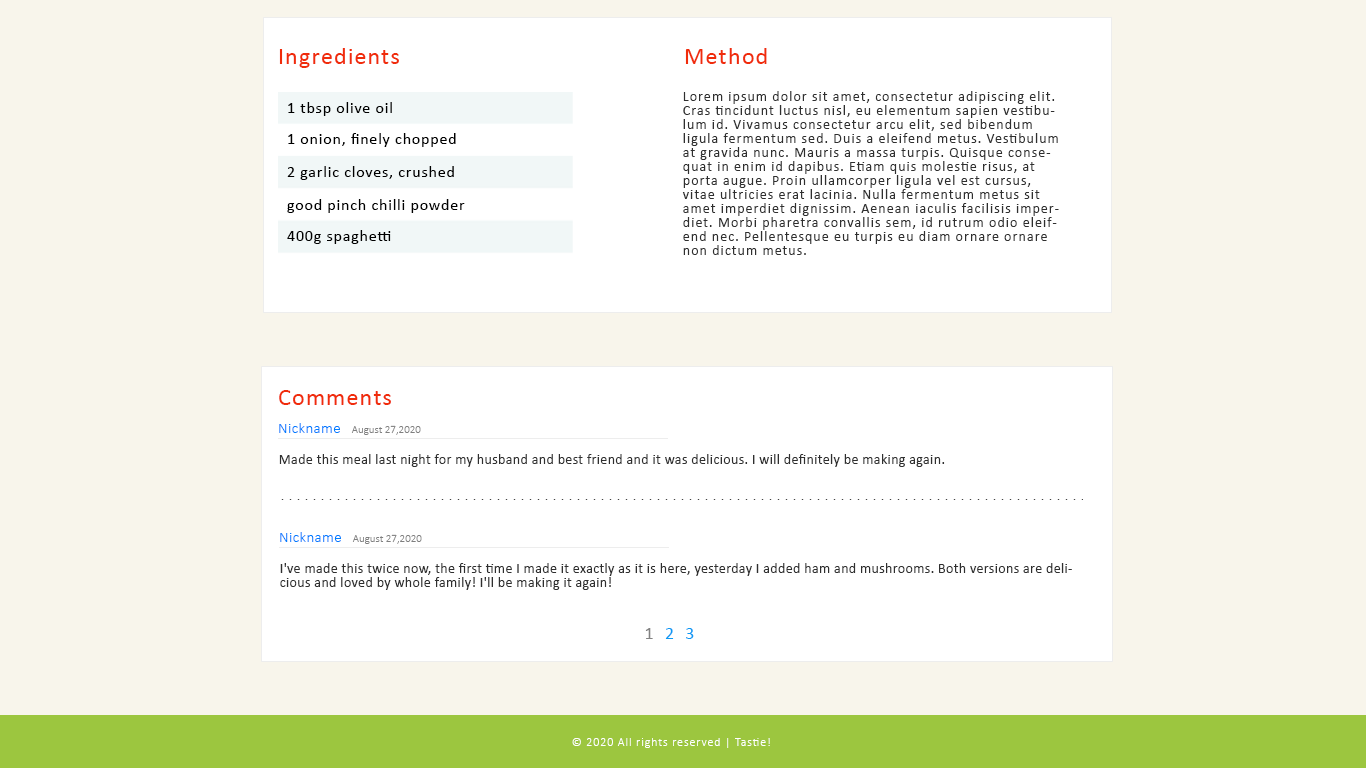
<style>
.page{position:relative;width:1366px;height:768px;background:#f8f5eb}
.page>*{position:absolute;margin:0}
.t1{font:24px "Calibri";letter-spacing:0.05em;color:#f02c0b}
.t2{font:16px "Calibri";letter-spacing:0.05em;color:#000000}
.t3{font:14px/14px "Calibri";letter-spacing:0.075em;color:#2f2f2f}
.t4{font:15px "Calibri-Light";letter-spacing:0.025em;color:#007eff}
.t5{font:11px "Calibri-Light";color:#7f7f7f}
.t6{font:14px "Calibri";letter-spacing:0.025em;color:#2f2f2f}
.t7{font:14px/14px "Calibri";letter-spacing:0.025em;color:#2f2f2f}
.t8{font:18px "Calibri";letter-spacing:0.2em;color:#0c9af4}
.t9{font:18px "Calibri";letter-spacing:0.2em;color:#828282}
.t10{font:12px "Calibri-Light";letter-spacing:0.075em;color:#ffffff}
</style>
<div class="page">
<p class="t1" style="left:279px;top:48px;width:120px;height:20px">Ingredients</p>
<p class="t1" style="left:685px;top:48px;width:82px;height:16px">Method</p>
<p class="t2" style="left:288px;top:102px;width:104px;height:14px">1 tbsp olive oil</p>
<p class="t3" style="left:682px;top:91px;width:377px;height:164px">Lorem ipsum dolor sit amet, consectetur adipiscing elit. Cras tincidunt luctus nisl, eu elementum sapien vestibulum id. Vivamus consectetur arcu elit, sed bibendum ligula fermentum sed. Duis a eleifend metus. Vestibulum at gravida nunc. Mauris a massa turpis. Quisque consequat in enim id dapibus. Etiam quis molestie risus, at porta augue. Proin ullamcorper ligula vel est cursus, vitae ultricies erat lacinia. Nulla fermentum metus sit amet imperdiet dignissim. Aenean iaculis facilisis imperdiet. Morbi pharetra convallis sem, id rutrum odio eleifend nec. Pellentesque eu turpis eu diam ornare ornare non dictum metus.</p>
<p class="t2" style="left:288px;top:133px;width:168px;height:14px">1 onion, finely chopped</p>
<p class="t2" style="left:287px;top:166px;width:167px;height:14px">2 garlic cloves, crushed</p>
<p class="t2" style="left:287px;top:199px;width:178px;height:14px">good pinch chilli powder</p>
<p class="t2" style="left:287px;top:230px;width:104px;height:14px">400g spaghetti</p>
<p class="t1" style="left:279px;top:390px;width:112px;height:15px">Comments</p>
<p class="t4" style="left:279px;top:423px;width:61px;height:10px">Nickname</p>
<p class="t5" style="left:351px;top:425px;width:70px;height:10px">August 27,2020</p>
<p class="t6" style="left:279px;top:454px;width:666px;height:13px">Made this meal last night for my husband and best friend and it was delicious. I will definitely be making again.</p>
<p class="t4" style="left:280px;top:532px;width:61px;height:10px">Nickname</p>
<p class="t5" style="left:352px;top:534px;width:70px;height:10px">August 27,2020</p>
<p class="t7" style="left:280px;top:563px;width:792px;height:27px">I've made this twice now, the first time I made it exactly as it is here, yesterday I added ham and mushrooms. Both versions are delicious and loved by whole family! I'll be making it again!</p>
<p class="t8" style="left:645px;top:628px;width:49px;height:11px"><span class="t9">1</span> 2 3</p>
<p class="t10" style="left:572px;top:738px;width:198px;height:10px">© 2020 All rights reserved | Tastie!</p>
</div>
